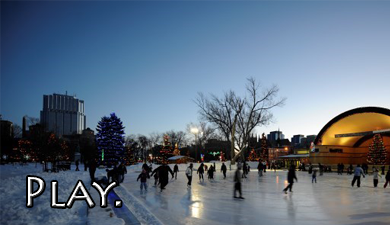
<style>
.page{position:relative;width:390px;height:225px}
.page>*{position:absolute;margin:0}
.t1{font:40px "LithosPro-Regular"}
</style>
<div class="page">
<p class="t1" style="left:27px;top:177px;width:94px;height:30px">Play.</p>
</div>
